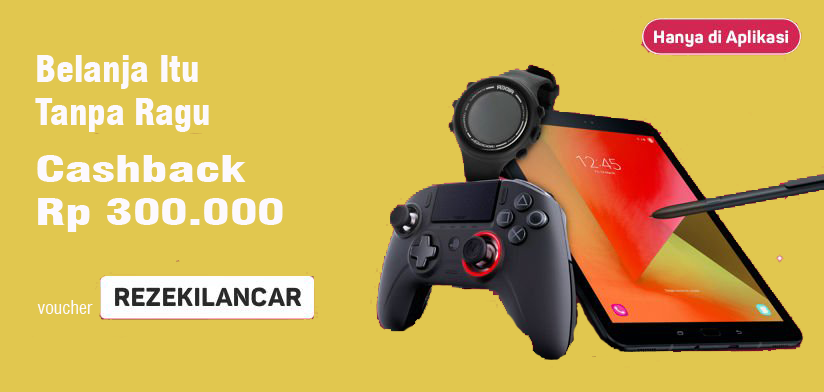
<style>
.page{position:relative;width:824px;height:392px;background:#e1c74f}
.page>*{position:absolute;margin:0}
.t1{font:36px "Swiss721BT-BlackCondensed";color:#fcf9fd}
.t2{font:36px "Swiss721BT-BlackCondensed";color:#fcf9fd;scale:1.44 1}
.t3{font:18px "Swiss721BT-RomanCondensed";color:#fcf9fd}
</style>
<div class="page">
<p class="t1" style="left:35px;top:55px;width:174px;height:77px">Belanja Itu<br>Tanpa Ragu</p>
<p class="t2" style="left:37px;top:155px;width:246px;height:77px">Cashback<br>Rp 300.000</p>
<p class="t3" style="left:37px;top:300px;width:56px;height:14px">voucher</p>
</div>
